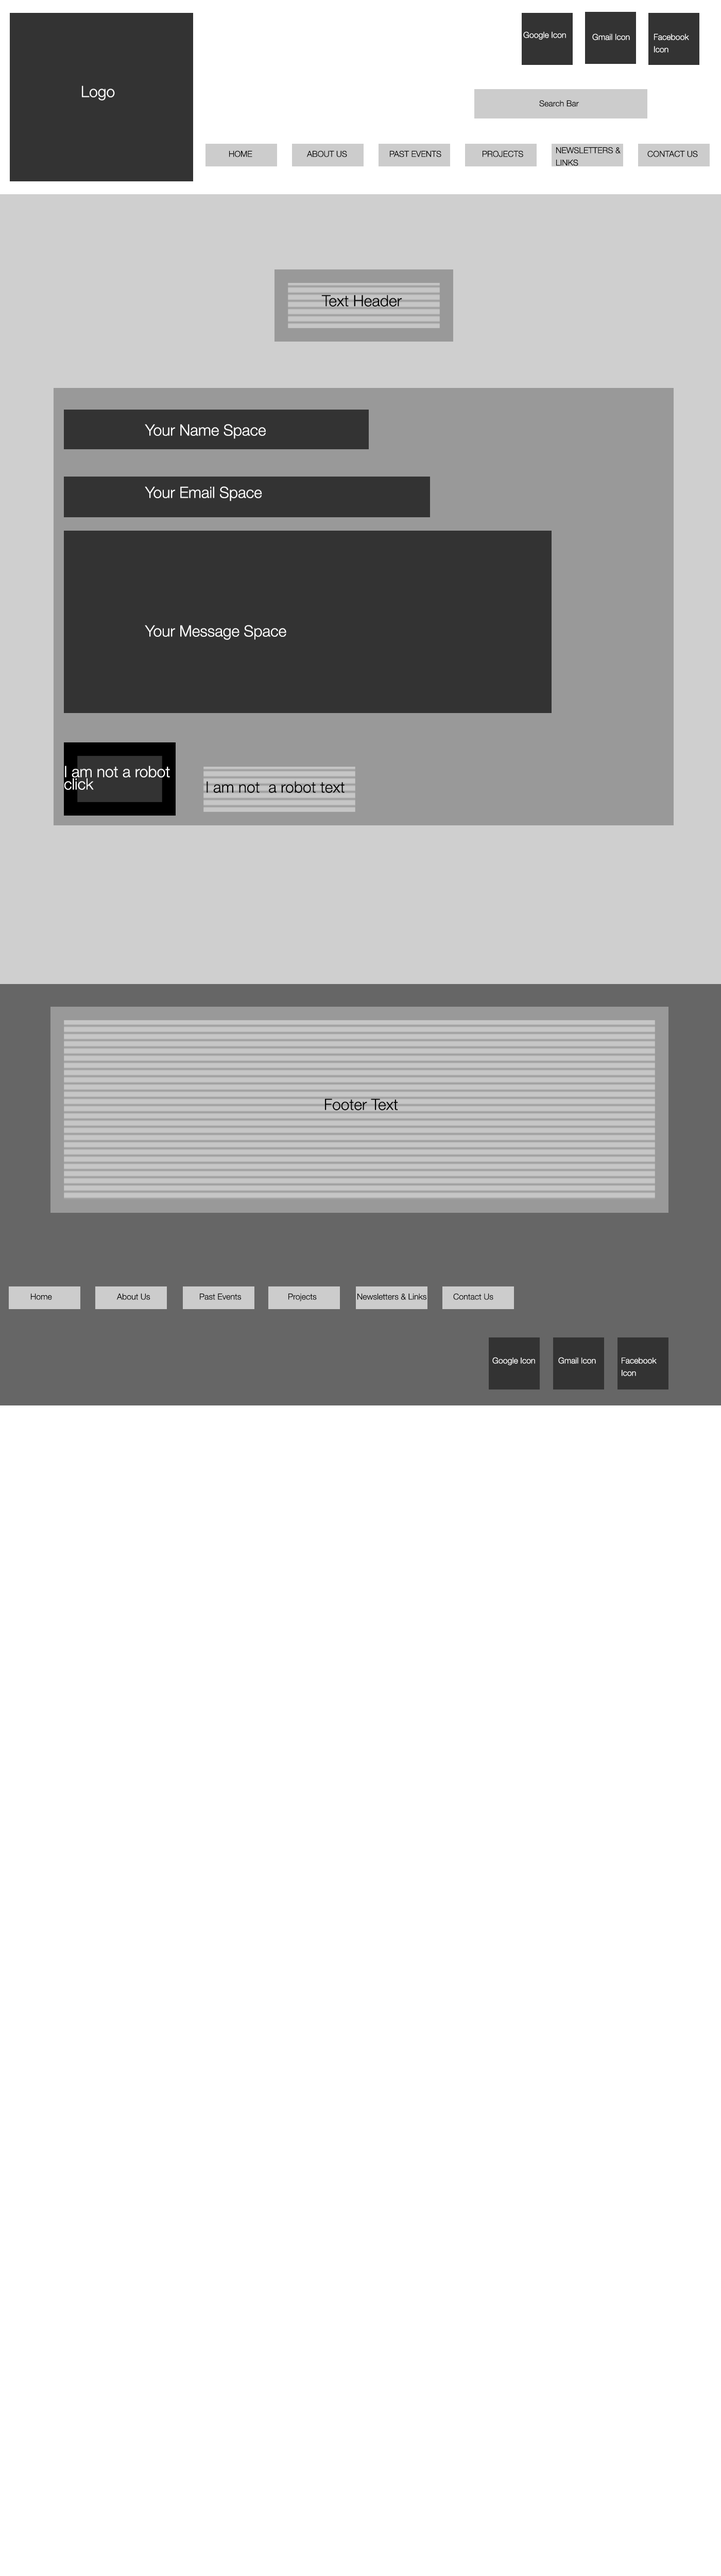
<style>
.page{position:relative;width:721px;height:2576px;background:#ffffff}
.page>*{position:absolute;margin:0}
.t1{font:8.2px "HelveticaNeue-Light";color:#ffffff}
.t2{font:8.2px/12.4px "HelveticaNeue-Light";color:#ffffff}
.t3{font:15.5px "HelveticaNeue-Light";color:#ffffff}
.t4{font:8.2px "HelveticaNeue-Light";color:#000000}
.t5{font:8.2px/12.4px "HelveticaNeue-Light";color:#000000}
.t6{font:15.5px "HelveticaNeue-Light";color:#000000}
.t7{font:15.5px/12.4px "HelveticaNeue-Light";color:#ffffff}
</style>
<div class="page">
<p class="t1" style="left:523px;top:31px;width:43px;height:9px">Google Icon</p>
<p class="t1" style="left:592px;top:33px;width:38px;height:7px">Gmail Icon</p>
<p class="t2" style="left:654px;top:33px;width:35px;height:20px">Facebook Icon</p>
<p class="t3" style="left:82px;top:86px;width:33px;height:14px">Logo</p>
<p class="t4" style="left:539px;top:100px;width:40px;height:7px">Search Bar</p>
<p class="t5" style="left:556px;top:147px;width:65px;height:19px">NEWSLETTERS &amp; LINKS</p>
<p class="t4" style="left:229px;top:150px;width:23px;height:7px">HOME</p>
<p class="t4" style="left:307px;top:150px;width:40px;height:7px">ABOUT US</p>
<p class="t4" style="left:390px;top:150px;width:52px;height:7px">PAST EVENTS</p>
<p class="t4" style="left:483px;top:150px;width:40px;height:7px">PROJECTS</p>
<p class="t4" style="left:648px;top:150px;width:50px;height:7px">CONTACT US</p>
<p class="t6" style="left:321px;top:295px;width:81px;height:12px">Text Header</p>
<p class="t3" style="left:145px;top:424px;width:121px;height:15px">Your Name Space</p>
<p class="t3" style="left:145px;top:486px;width:117px;height:15px">Your Email Space</p>
<p class="t3" style="left:145px;top:625px;width:141px;height:15px">Your Message Space</p>
<p class="t7" style="left:64px;top:766px;width:106px;height:24px">I am not a robot<br>click</p>
<p class="t6" style="left:207px;top:781px;width:138px;height:12px">I am not  a robot text</p>
<p class="t6" style="left:325px;top:1098px;width:73px;height:12px">Footer Text</p>
<p class="t4" style="left:31px;top:1293px;width:21px;height:7px">Home</p>
<p class="t4" style="left:116px;top:1293px;width:34px;height:7px">About Us</p>
<p class="t4" style="left:200px;top:1293px;width:41px;height:7px">Past Events</p>
<p class="t4" style="left:289px;top:1293px;width:28px;height:8px">Projects</p>
<p class="t4" style="left:358px;top:1293px;width:69px;height:7px">Newsletters &amp; Links</p>
<p class="t4" style="left:453px;top:1293px;width:41px;height:7px">Contact Us</p>
<p class="t1" style="left:493px;top:1357px;width:42px;height:8px">Google Icon</p>
<p class="t1" style="left:558px;top:1357px;width:38px;height:7px">Gmail Icon</p>
<p class="t2" style="left:622px;top:1358px;width:35px;height:18px">Facebook Icon</p>
</div>
